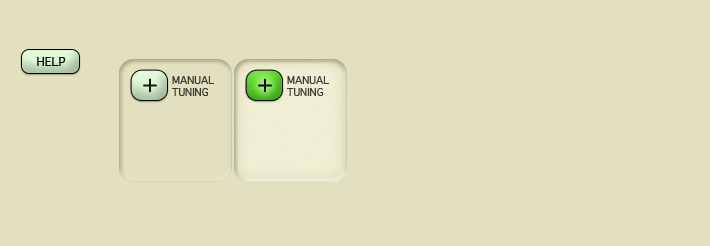
<style>
.page{position:relative;width:710px;height:246px;background:#e2e0be}
.page>*{position:absolute;margin:0}
.t1{font:12px "Geneva";color:#000000}
.t2{font:24px "Geneva";color:#000000}
.t3{font:10px "Geneva";color:#393830}
.t4{font:10px "Geneva";color:#3c3c36}
</style>
<div class="page">
<p class="t1" style="left:37px;top:57px;width:29px;height:9px">HELP</p>
<p class="t2" style="left:143px;top:78px;width:14px;height:14px;opacity:0.9">+</p>
<p class="t3" style="left:172px;top:76px;width:42px;height:20px">MANUAL<br>TUNING</p>
<p class="t2" style="left:258px;top:78px;width:14px;height:14px">+</p>
<p class="t4" style="left:287px;top:76px;width:42px;height:20px">MANUAL<br>TUNING</p>
</div>
